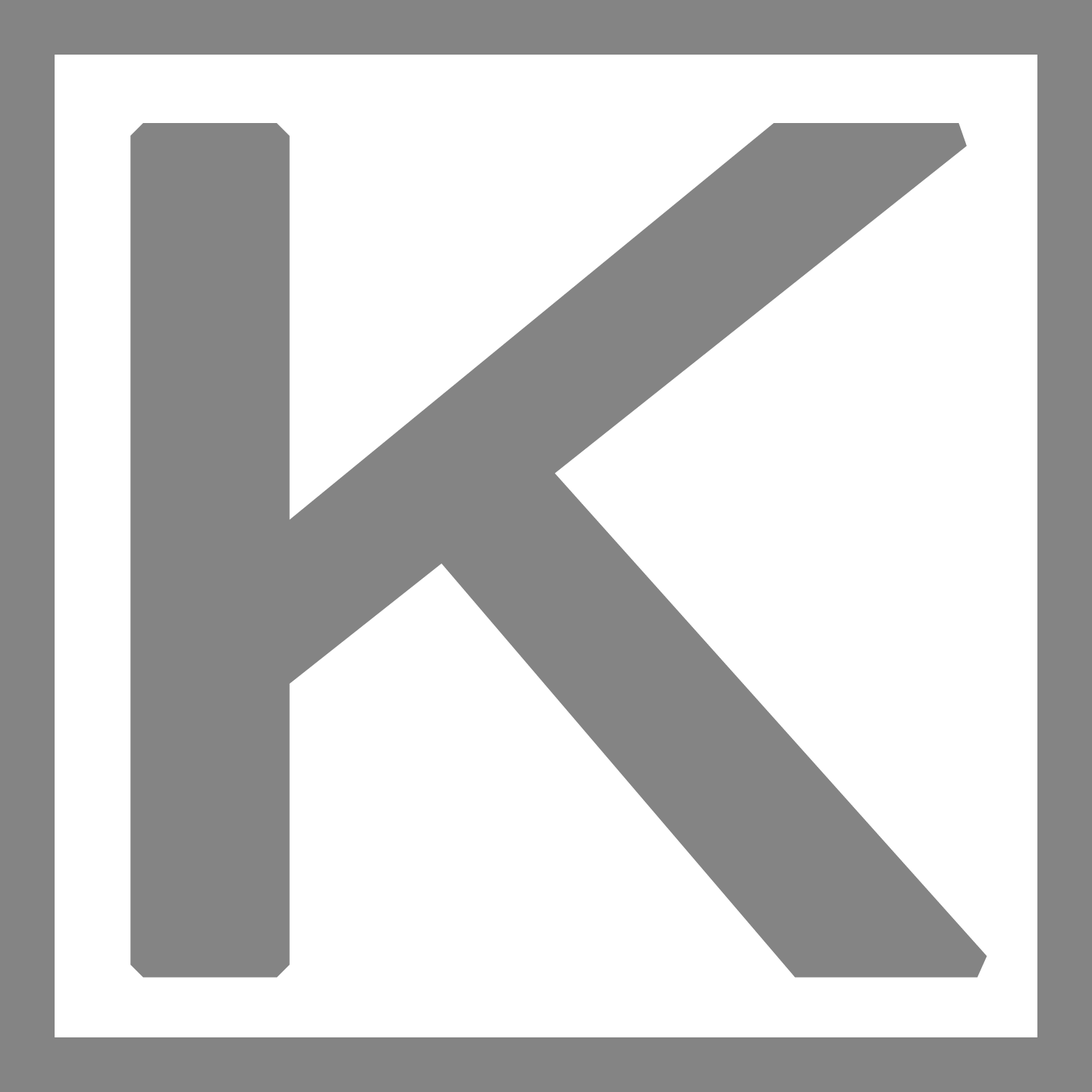
<style>
.page{position:relative;width:1092px;height:1092px;background:#ffffff}
.page>*{position:absolute;margin:0}
.t1{font:1157.7px "ArialUnicodeMS";color:#848484;font-weight:bold;scale:1.22 1}
</style>
<div class="page">
<p class="t1" style="left:130px;top:123px;width:857px;height:855px">K</p>
</div>
